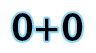
<style>
.page{position:relative;width:96px;height:53px;background:#ffffff}
.page>*{position:absolute;margin:0}
.t1{font:42px "MyriadPro-Semibold";letter-spacing:0.025em;color:#000000;text-transform:uppercase}
</style>
<div class="page">
<p class="t1" style="left:12px;top:13px;width:71px;height:28px">0+0</p>
</div>
